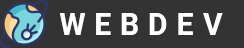
<style>
.page{position:relative;width:244px;height:48px;background:#333333}
.page>*{position:absolute;margin:0}
.t1{font:30px "Roboto-Bold";letter-spacing:0.295em;color:#ffffff}
</style>
<div class="page">
<p class="t1" style="left:59px;top:13px;width:164px;height:22px">WEBDEV</p>
</div>
